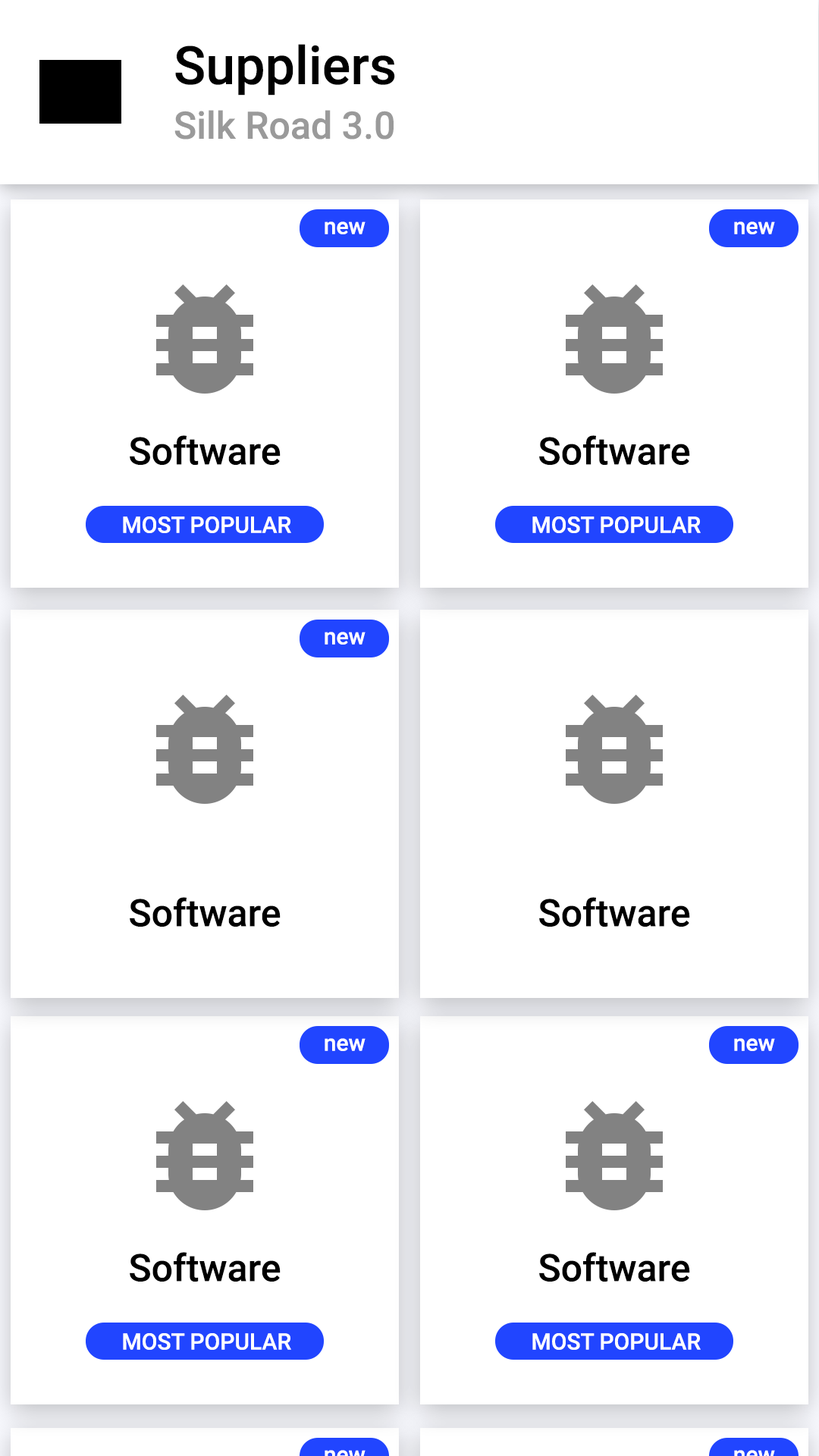
<style>
.page{position:relative;width:819px;height:1456px;background:#ffffff}
.page>*{position:absolute;margin:0}
.t1{font:53.1px "Roboto-Medium";color:#000000}
.t2{font:37.9px "Roboto-Medium";color:#9a9a9a}
.t3{font:22.7px "Roboto-Medium";color:#ffffff}
.t4{font:37.9px "Roboto-Medium";color:#000000}
</style>
<div class="page">
<p class="t1" style="left:175px;top:44px;width:220px;height:52px">Suppliers</p>
<p class="t2" style="left:174px;top:110px;width:220px;height:30px">Silk Road 3.0</p>
<p class="t3" style="left:325px;top:221px;width:41px;height:13px">new</p>
<p class="t3" style="left:734px;top:221px;width:41px;height:13px">new</p>
<p class="t4" style="left:130px;top:435px;width:151px;height:30px">Software</p>
<p class="t4" style="left:539px;top:435px;width:151px;height:30px">Software</p>
<p class="t3" style="left:123px;top:516px;width:168px;height:17px">MOST POPULAR</p>
<p class="t3" style="left:532px;top:516px;width:169px;height:17px">MOST POPULAR</p>
<p class="t3" style="left:325px;top:632px;width:41px;height:13px">new</p>
<p class="t4" style="left:130px;top:897px;width:151px;height:30px">Software</p>
<p class="t4" style="left:539px;top:897px;width:151px;height:30px">Software</p>
<p class="t3" style="left:325px;top:1038px;width:41px;height:13px">new</p>
<p class="t3" style="left:734px;top:1038px;width:41px;height:13px">new</p>
<p class="t4" style="left:130px;top:1252px;width:151px;height:30px">Software</p>
<p class="t4" style="left:539px;top:1252px;width:151px;height:30px">Software</p>
<p class="t3" style="left:123px;top:1333px;width:168px;height:17px">MOST POPULAR</p>
<p class="t3" style="left:532px;top:1333px;width:169px;height:17px">MOST POPULAR</p>
</div>
